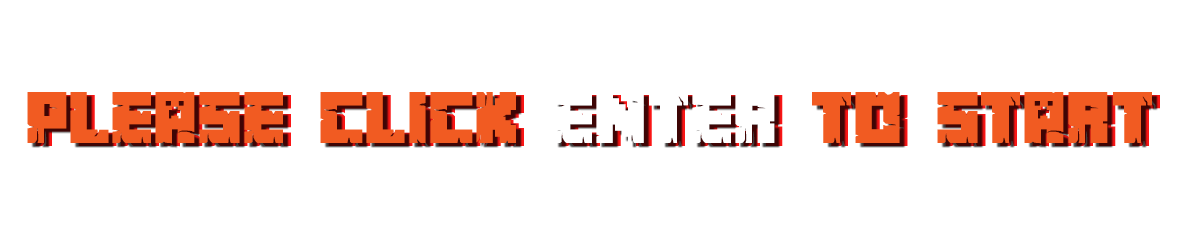
<style>
.page{position:relative;width:1200px;height:236px;background:#ffffff}
.page>*{position:absolute;margin:0}
.t1{font:65px "MinecrafterAlt";color:#f15b22}
.t2{font:65px "MinecrafterAlt";color:#ffffff}
.t3{font:65px "MinecrafterAlt"}
</style>
<div class="page">
<p class="t1" style="left:27px;top:92px;width:1125px;height:52px">Please click <span class="t2">ENTER</span> to Start</p>
<p class="t3" style="left:35px;top:95px;width:1125px;height:52px">Please click ENTER to Start</p>
</div>
